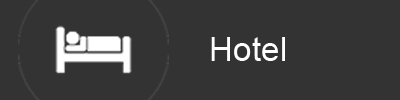
<style>
.page{position:relative;width:400px;height:100px;background:#333333}
.page>*{position:absolute;margin:0}
.t1{font:33.3px "ArialMT";color:#ffffff}
</style>
<div class="page">
<p class="t1" style="left:211px;top:37px;width:74px;height:24px">Hotel</p>
</div>
